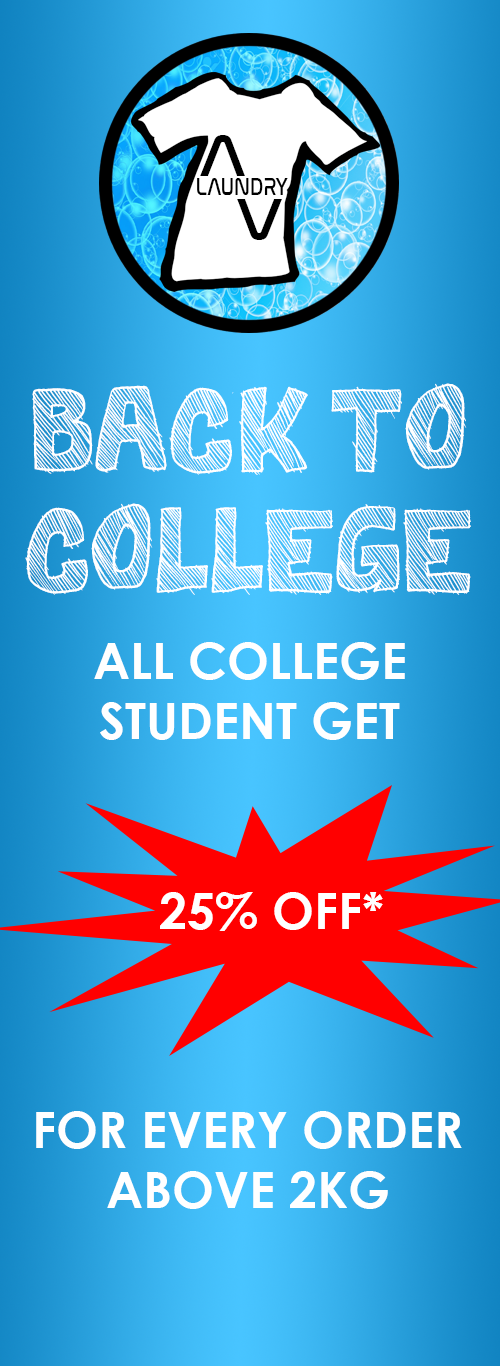
<style>
.page{position:relative;width:500px;height:1366px}
.page>*{position:absolute;margin:0}
.t1{font:50px "BestPrices";color:#ffffff}
.t2{font:12px "CenturyGothic-Bold";color:#ffffff}
.t3{font:50px "CenturyGothic-Bold";color:#ffffff}
</style>
<div class="page">
<p class="t1" style="left:25px;top:383px;width:446px;height:212px;text-align:center">BACK TO<br><br>COLLEGE</p>
<p class="t2" style="left:94px;top:642px;width:311px;height:98px;text-align:center">ALL COLLEGE<br>STUDENT GET</p>
<p class="t3" style="left:160px;top:892px;width:223px;height:39px">25% OFF*</p>
<p class="t2" style="left:36px;top:1111px;width:426px;height:98px;text-align:center">FOR EVERY ORDER<br>ABOVE 2KG</p>
</div>
